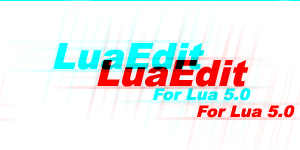
<style>
.page{position:relative;width:300px;height:150px;background:#ffffff}
.page>*{position:absolute;margin:0}
.t1{font:37.1px "Arial-Black";color:#00fdfd}
.t2{font:16.5px "Arial-Black";color:#00fbfb}
</style>
<div class="page">
<p class="t1" style="left:53px;top:42px;width:152px;height:27px">LuaEdit</p>
<p class="t2" style="left:153px;top:87px;width:98px;height:13px">For Lua 5.0</p>
</div>
